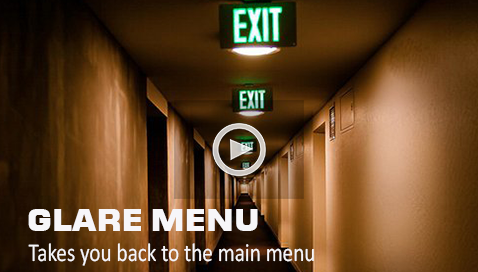
<style>
.page{position:relative;width:478px;height:272px}
.page>*{position:absolute;margin:0}
.t1{font:30px "Moire-ExtraBold";color:#f7f6f9}
.t2{font:25.7px "Calibri";color:#f7f6f9;scale:0.83 1}
</style>
<div class="page">
<p class="t1" style="left:28px;top:209px;width:230px;height:22px">GLARE MENU</p>
<p class="t2" style="left:28px;top:243px;width:286px;height:23px">Takes you back to the main menu</p>
</div>
